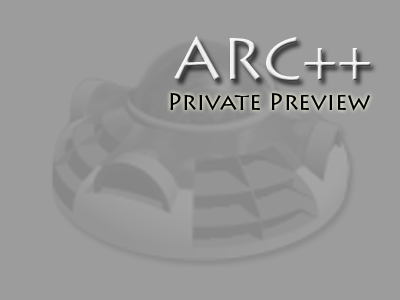
<style>
.page{position:relative;width:400px;height:300px;background:#9c9c9c}
.page>*{position:absolute;margin:0}
.t1{font:60px "LithosPro-Regular";color:#f1f1f1}
.t2{font:24px "LithosPro-Regular";color:#000000}
</style>
<div class="page">
<p class="t1" style="left:174px;top:36px;width:197px;height:45px">ARC++</p>
<p class="t2" style="left:170px;top:93px;width:200px;height:18px">Private Preview</p>
</div>
